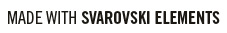
<style>
.page{position:relative;width:227px;height:33px;background:#ffffff}
.page>*{position:absolute;margin:0}
.t1{font:17.8px "TradeGothicLTStd-BdCn20";color:#1b1814;text-transform:uppercase}
.t2{font:17.8px "TradeGothicLTStd-Cn18";color:#1b1814;text-transform:uppercase}
</style>
<div class="page">
<p class="t1" style="left:8px;top:11px;width:212px;height:13px"><span class="t2">Made with </span>svarovski Elements</p>
</div>
